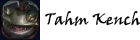
<style>
.page{position:relative;width:140px;height:40px;background:#ffffff}
.page>*{position:absolute;margin:0}
.t1{font:16px "VinerHandITC";color:#000000}
</style>
<div class="page">
<p class="t1" style="left:45px;top:11px;width:97px;height:16px">Tahm Kench</p>
</div>
